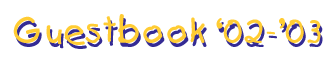
<style>
.page{position:relative;width:329px;height:60px;background:#ffffff}
.page>*{position:absolute;margin:0}
.t1{font:33px "KidsPlain";letter-spacing:0.02em;color:#ffcc33}
.t2{font:33px "KidsPlain";letter-spacing:0.02em;color:#342b94}
</style>
<div class="page">
<p class="t1" style="left:13px;top:14px;width:308px;height:31px">Guestbook ‘02-’03</p>
<p class="t2" style="left:15px;top:18px;width:308px;height:31px">Guestbook ‘02-’03</p>
</div>
